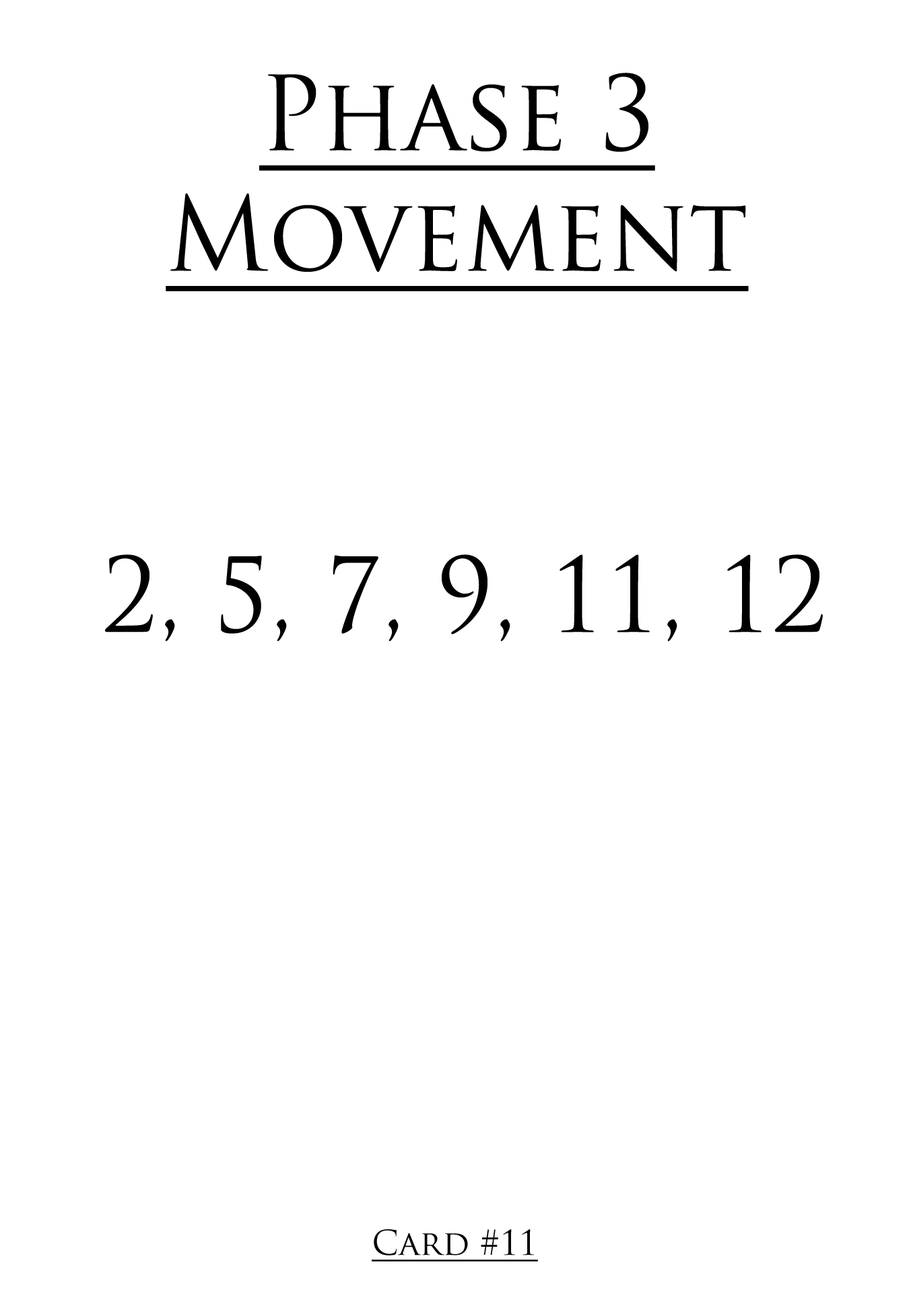
<style>
.page{position:relative;width:909px;height:1312px;background:#ffffff}
.page>*{position:absolute;margin:0}
.t1{font:100.6px "TrajanPro-Regular";color:#000000;text-decoration:underline;scale:0.97 1}
.t2{font:100.6px "TrajanPro-Regular";color:#000000;scale:0.97 1}
.t3{font:33.5px "TrajanPro-Regular";color:#000000;text-decoration:underline}
</style>
<div class="page">
<p class="t1" style="left:166px;top:73px;width:582px;height:218px;text-align:center">Phase 3<br>Movement</p>
<p class="t2" style="left:105px;top:555px;width:717px;height:86px">2, 5, 7, 9, 11, 12</p>
<p class="t3" style="left:372px;top:1230px;width:166px;height:32px">Card #11</p>
</div>
